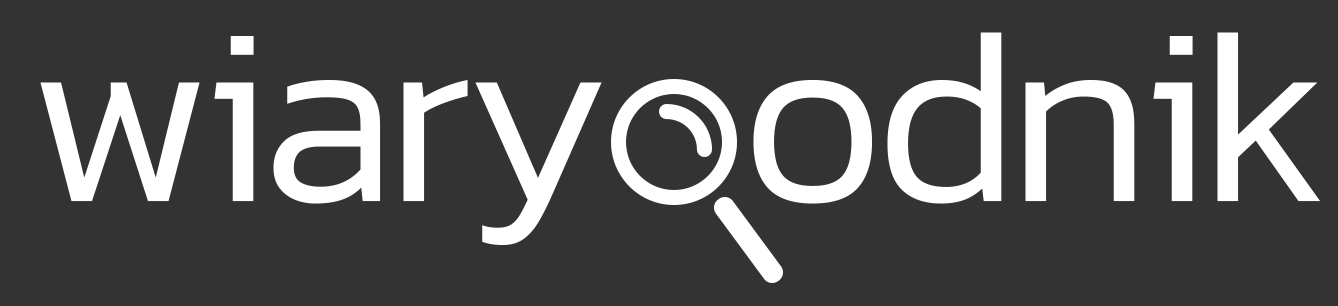
<style>
.page{position:relative;width:1338px;height:306px;background:#333333}
.page>*{position:absolute;margin:0}
.t1{font:250px "Kanit-Light";letter-spacing:-0.04em;color:#ffffff}
</style>
<div class="page">
<p class="t1" style="left:40px;top:32px;width:1280px;height:213px">wiary   odnik</p>
</div>
